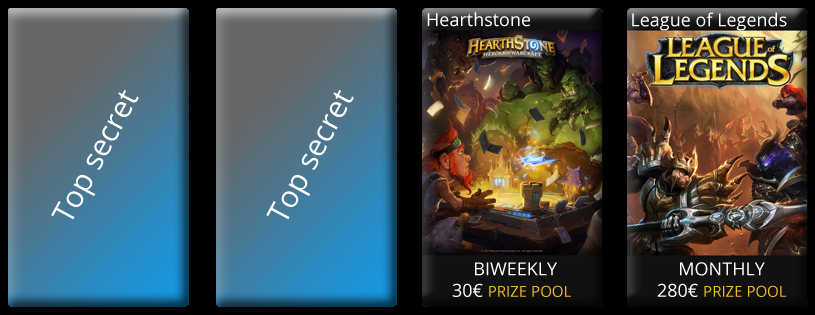
<style>
.page{position:relative;width:815px;height:315px}
.page>*{position:absolute;margin:0}
.t1{font:18px "OpenSans";color:#ffffff}
.t2{font:30px "OpenSans";color:#ffffff}
.t3{font:15px "OpenSans";color:#f2bb25}
</style>
<div class="page">
<p class="t1" style="left:427px;top:12px;width:103px;height:15px">Hearthstone</p>
<p class="t1" style="left:632px;top:12px;width:155px;height:19px">League of Legends</p>
<p class="t2" style="left:51px;top:90px;width:88px;height:130px;rotate:-62deg">Top secret</p>
<p class="t2" style="left:266px;top:90px;width:88px;height:130px;rotate:-62deg">Top secret</p>
<p class="t1" style="left:475px;top:262px;width:82px;height:14px">BIWEEKLY</p>
<p class="t1" style="left:680px;top:262px;width:85px;height:14px">MONTHLY</p>
<p class="t3" style="left:452px;top:283px;width:119px;height:14px"><span class="t1">30€ </span>PRIZE POOL</p>
<p class="t3" style="left:657px;top:283px;width:130px;height:14px"><span class="t1">280€ </span>PRIZE POOL</p>
</div>
